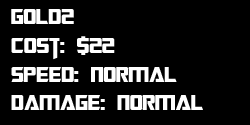
<style>
.page{position:relative;width:250px;height:125px;background:#000000}
.page>*{position:absolute;margin:0}
.t1{font:24px "TransformersMovie";color:#ffffff}
</style>
<div class="page">
<p class="t1" style="left:11px;top:9px;width:192px;height:101px">gold2<br>Cost: $22<br>Speed: Normal<br>Damage: Normal</p>
</div>
